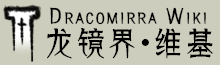
<style>
.page{position:relative;width:220px;height:65px;background:#cccdbc}
.page>*{position:absolute;margin:0}
.t1{font:20px "FZXZZBJW--GB1-0";letter-spacing:0.1em;color:#000000;font-variant:small-caps;font-weight:bold}
.t2{font:33.3px "FZXZZBJW--GB1-0";letter-spacing:-0.075em;color:#000000}
.t3{font:33.3px "KozGoPr6N-Regular";letter-spacing:-0.075em;color:#000000}
</style>
<div class="page">
<p class="t1" style="left:50px;top:7px;width:156px;height:18px">Dracomirra Wiki</p>
<p class="t2" style="left:47px;top:27px;width:166px;height:32px">龙镜界<span class="t3">・</span>维基</p>
</div>
